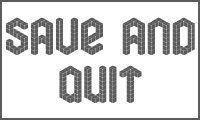
<style>
.page{position:relative;width:200px;height:120px;background:#ffffff}
.page>*{position:absolute;margin:0}
.t1{font:68px/48px "soma";color:#5c5c5c}
</style>
<div class="page">
<p class="t1" style="left:6px;top:17px;width:189px;height:86px;text-align:center">save and<br>quit</p>
</div>
